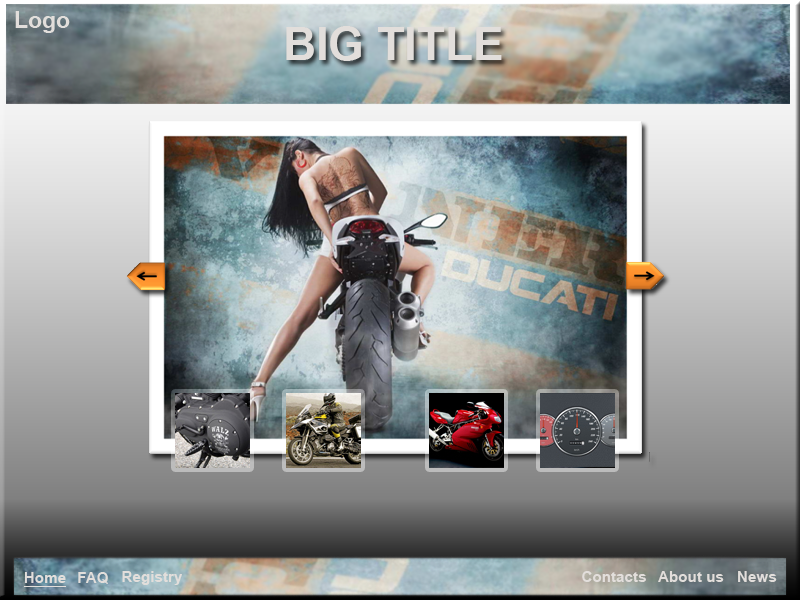
<style>
.page{position:relative;width:800px;height:600px}
.page>*{position:absolute;margin:0}
.t1{font:22.9px "Arial-BoldMT";color:#e2dedb}
.t2{font:45.7px "Arial-BoldMT";color:#e2dedb}
.t3{font:15.2px "Arial-BoldMT";color:#e2dedb}
</style>
<div class="page">
<p class="t1" style="left:15px;top:11px;width:55px;height:22px">Logo</p>
<p class="t2" style="left:286px;top:26px;width:216px;height:35px">BIG TITLE</p>
<p class="t3" style="left:78px;top:572px;width:30px;height:12px">FAQ</p>
<p class="t3" style="left:122px;top:571px;width:60px;height:14px">Registry</p>
<p class="t3" style="left:582px;top:571px;width:64px;height:11px">Contacts</p>
<p class="t3" style="left:658px;top:571px;width:66px;height:11px">About us</p>
<p class="t3" style="left:738px;top:571px;width:39px;height:11px">News</p>
</div>
